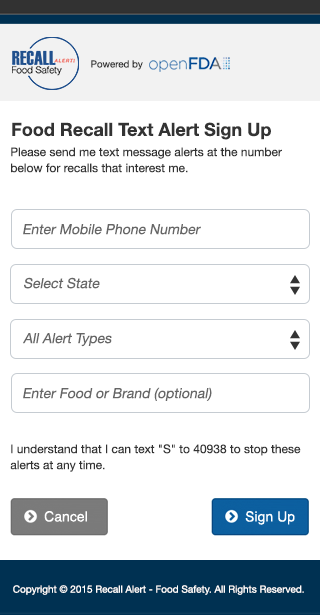
<style>
.page{position:relative;width:320px;height:615px;background:#ffffff}
.page>*{position:absolute;margin:0}
.t1{font:9.8px "HelveticaNeue";color:#333333}
.t2{font:18px "HelveticaNeue-Bold";color:#333333}
.t3{font:12px/16px "HelveticaNeue";color:#333333}
.t4{font:14px "HelveticaNeue";color:#666666;font-style:italic}
.t5{font:10px "HelveticaNeue";color:#ffffff}
</style>
<div class="page">
<p class="t1" style="left:91px;top:60px;width:52px;height:10px">Powered by</p>
<p class="t2" style="left:12px;top:122px;width:259px;height:18px">Food Recall Text Alert Sign Up</p>
<p class="t3" style="left:11px;top:147px;width:271px;height:26px">Please send me text message alerts at the number below for recalls that interest me.</p>
<p class="t4" style="left:23px;top:224px;width:178px;height:11px">Enter Mobile Phone Number</p>
<p class="t4" style="left:24px;top:277px;width:76px;height:12px">Select State</p>
<p class="t4" style="left:23px;top:333px;width:89px;height:14px">All Alert Types</p>
<p class="t4" style="left:23px;top:387px;width:189px;height:14px">Enter Food or Brand (optional)</p>
<p class="t3" style="left:10px;top:444px;width:291px;height:28px">I understand that I can text "S" to 40938 to stop these alerts at any time.</p>
<p class="t5" style="left:13px;top:585px;width:291px;height:10px">Copyright © 2015 Recall Alert - Food Safety. All Rights Reserved.</p>
</div>
